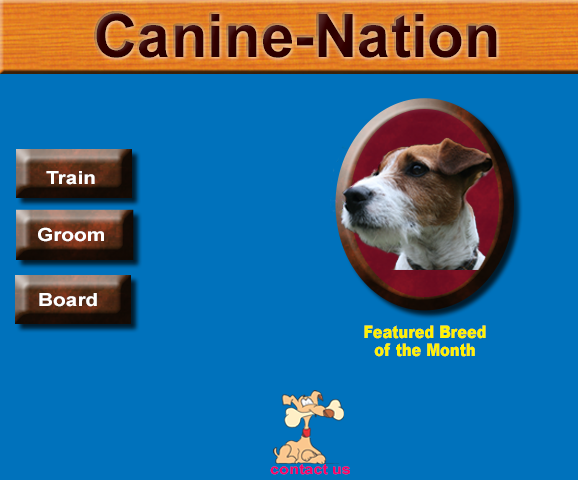
<style>
.page{position:relative;width:578px;height:480px;background:#0072bc}
.page>*{position:absolute;margin:0}
.t1{font:60px "Arial-BoldMT";color:#330000}
.t2{font:18px "Arial-BoldMT";letter-spacing:0.005em;color:#ffffff;scale:1.15 1}
.t3{font:17.5px/18px "Arial-Black";letter-spacing:-0.005em;color:#fff200;scale:0.84 1}
.t4{font:17.5px/24px "Arial-Black";letter-spacing:-0.005em;color:#fff200;scale:0.84 1}
.t5{font:14px "Arial-BoldMT";letter-spacing:0.005em;color:#ff0066;scale:1.15 1}
</style>
<div class="page">
<p class="t1" style="left:96px;top:13px;width:401px;height:45px">Canine-Nation</p>
<p class="t2" style="left:46px;top:171px;width:49px;height:14px">Train</p>
<p class="t2" style="left:38px;top:227px;width:66px;height:15px">Groom</p>
<p class="t2" style="left:39px;top:293px;width:58px;height:14px">Board</p>
<p class="t3" style="left:364px;top:325px;width:122px;height:32px;text-align:center"><span class="t4">F</span>eatured Breed<br>of the Month</p>
<p class="t5" style="left:270px;top:464px;width:80px;height:11px">contact us</p>
</div>
